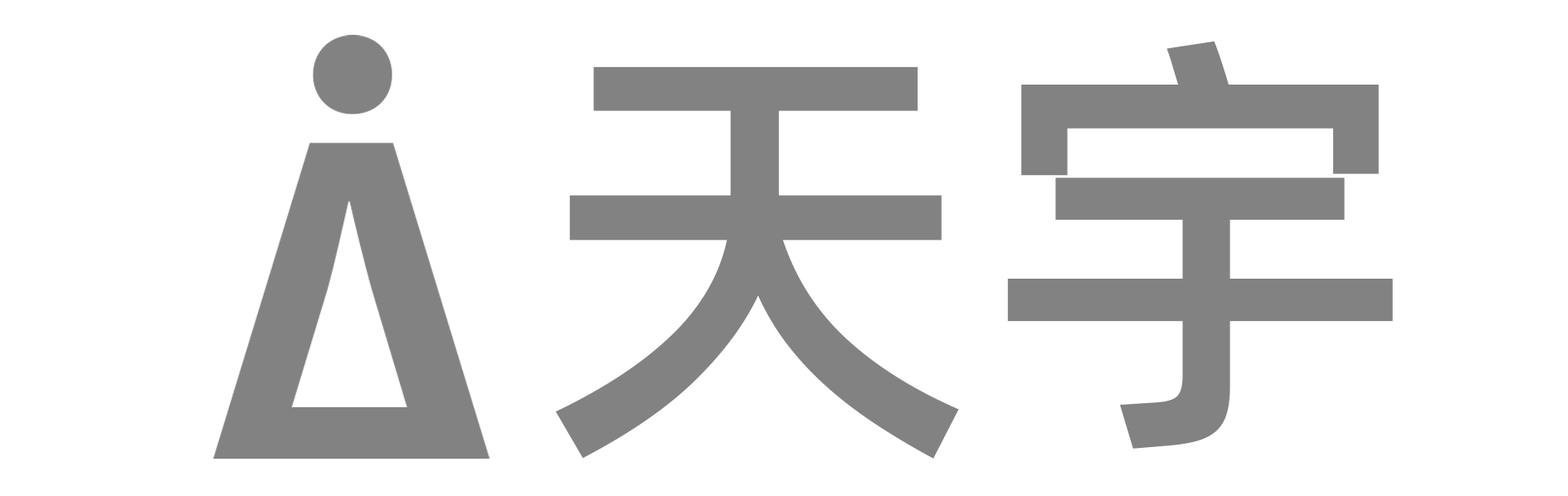
<style>
.page{position:relative;width:1568px;height:496px;background:#ffffff}
.page>*{position:absolute;margin:0}
.t1{font:450.1px "AlibabaPuHuiTi-Medium";color:#828282}
</style>
<div class="page">
<p class="t1" style="left:555px;top:41px;width:838px;height:418px">天宇</p>
</div>
